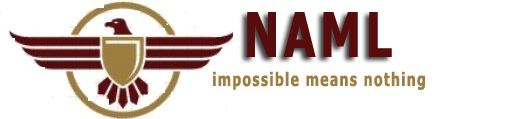
<style>
.page{position:relative;width:526px;height:119px;background:#ffffff}
.page>*{position:absolute;margin:0}
.t1{font:61.8px "Tahoma-Bold";letter-spacing:0.102em;color:#580c0c;scale:0.74 1}
.t2{font:18.5px "Tahoma-Bold";letter-spacing:0.102em;color:#9d7d40;scale:0.74 1}
</style>
<div class="page">
<p class="t1" style="left:247px;top:12px;width:145px;height:45px">NAML</p>
<p class="t2" style="left:213px;top:71px;width:212px;height:19px">impossible means nothing</p>
</div>
